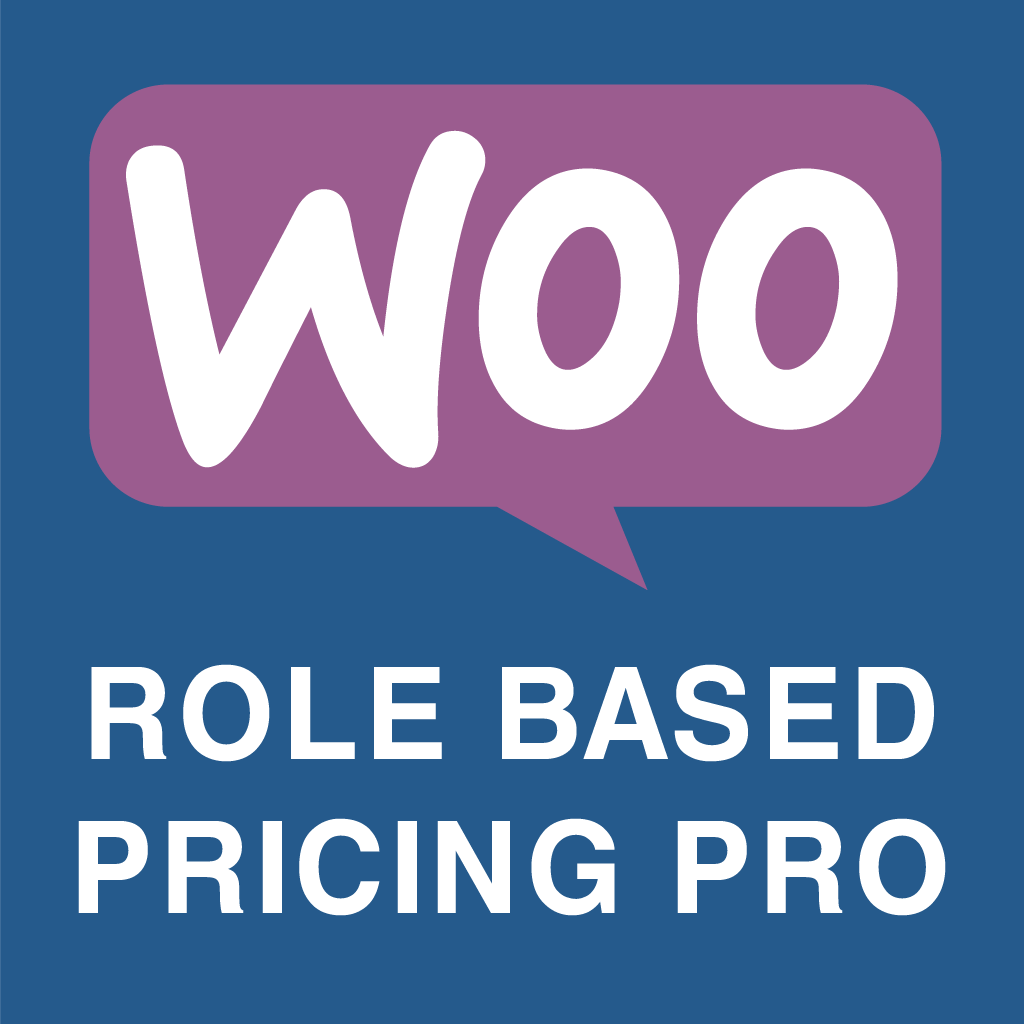
<style>
.page{position:relative;width:1024px;height:1024px;background:#255a8c}
.page>*{position:absolute;margin:0}
.t1{font:128px "HelveticaCyr-Bold";letter-spacing:0.025em;color:#ffffff;text-transform:uppercase}
</style>
<div class="page">
<p class="t1" style="left:78px;top:664px;width:868px;height:252px;text-align:center">Role based<br>pricing pro</p>
</div>
